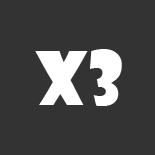
<style>
.page{position:relative;width:155px;height:155px;background:#333333}
.page>*{position:absolute;margin:0}
.t1{font:72px "ShowcardGothic-Reg";color:#ffffff}
</style>
<div class="page">
<p class="t1" style="left:35px;top:49px;width:87px;height:57px">X3</p>
</div>
